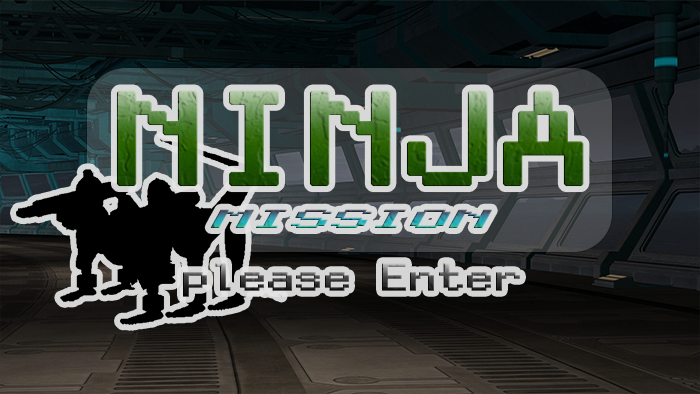
<style>
.page{position:relative;width:700px;height:394px}
.page>*{position:absolute;margin:0}
.t1{font:122px "PixelMplus12-Regular";font-weight:bold;scale:1.5 1}
.t2{font:24px "PixelMplus12-Regular";font-weight:bold;font-style:italic;scale:3.12 1}
.t3{font:36px "PixelMplus12-Regular";font-weight:bold;scale:1.5 1}
</style>
<div class="page">
<p class="t1" style="left:116px;top:90px;width:468px;height:97px">NINJA</p>
<p class="t2" style="left:210px;top:209px;width:282px;height:19px">MISSION</p>
<p class="t3" style="left:183px;top:263px;width:337px;height:34px">please Enter</p>
</div>
